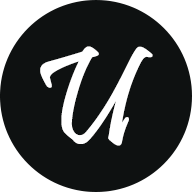
<style>
.page{position:relative;width:192px;height:192px;background:#0e1111}
.page>*{position:absolute;margin:0}
.t1{font:142px "Pristina-Regular";color:#ffffff;font-weight:bold}
</style>
<div class="page">
<p class="t1" style="left:40px;top:46px;width:113px;height:100px">U</p>
</div>
